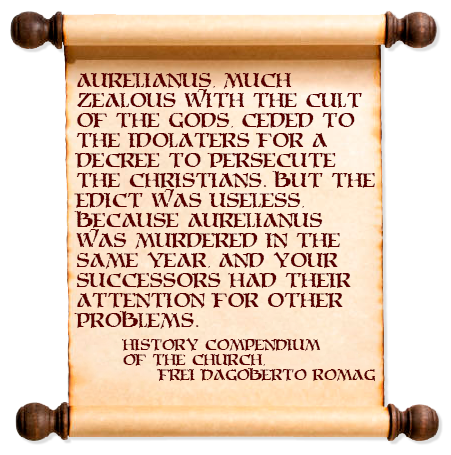
<style>
.page{position:relative;width:451px;height:455px;background:#ffffff}
.page>*{position:absolute;margin:0}
.t1{font:16.7px "MoriaCitadel";color:#580000}
.t2{font:12.5px "MoriaCitadel";color:#580000}
</style>
<div class="page">
<p class="t1" style="left:74px;top:73px;width:301px;height:256px">Aurelianus, much<br>zealous with the cult<br>of the gods, ceded to<br>the idolaters for a<br>decree to persecute<br>the christians. But the<br>edict was useless,<br>because Aurelianus<br>was murdered in the<br>same year, and your<br>successors had their<br>attention for other<br>problems.</p>
<p class="t2" style="left:122px;top:338px;width:253px;height:43px">History Compendium<br>of the Church,<br> Frei Dagoberto Romag</p>
</div>
